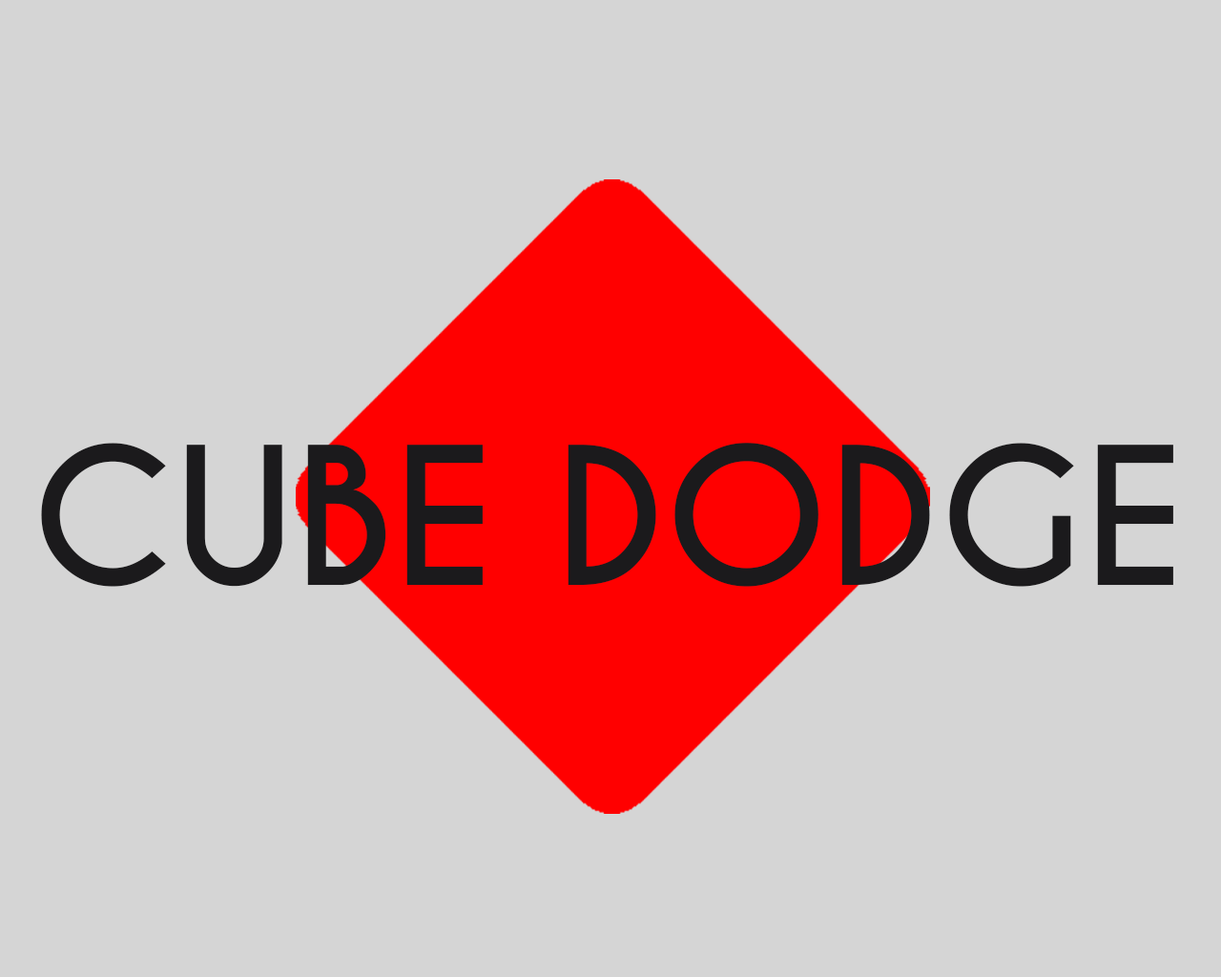
<style>
.page{position:relative;width:1221px;height:977px;background:#d5d5d5}
.page>*{position:absolute;margin:0}
.t1{font:179px "CaviarDreams-Bold";color:#1b1a1c}
</style>
<div class="page">
<p class="t1" style="left:41px;top:443px;width:1132px;height:144px">CUBE DODGE</p>
</div>
